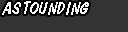
<style>
.page{position:relative;width:128px;height:32px;background:#333333}
.page>*{position:absolute;margin:0}
.t1{font:18px "DomDiagonalBT-Regular";color:#fbfbfb}
.t2{font:18px "DomDiagonalBT-Regular";letter-spacing:0.1em;color:#fbfbfb}
</style>
<div class="page">
<p class="t1" style="left:2px;top:1px;width:87px;height:14px"><span class="t2">AS</span>TOUNDING</p>
</div>
